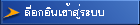
<style>
.page{position:relative;width:140px;height:25px}
.page>*{position:absolute;margin:0}
.t1{font:15.3px "EucrosiaDSE";color:#ffffff;scale:1.12 1}
</style>
<div class="page">
<p class="t1" style="left:25px;top:3px;width:79px;height:16px">ÅçÍ¡ÍÔ¹à¢éÒÊÙèÃÐºº</p>
</div>
